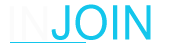
<style>
.page{position:relative;width:186px;height:48px;background:#ffffff}
.page>*{position:absolute;margin:0}
.t1{font:48px "DokChampa";color:#13c6ec;scale:0.95 1}
</style>
<div class="page">
<p class="t1" style="left:51px;top:4px;width:100px;height:36px">JOIN</p>
</div>
